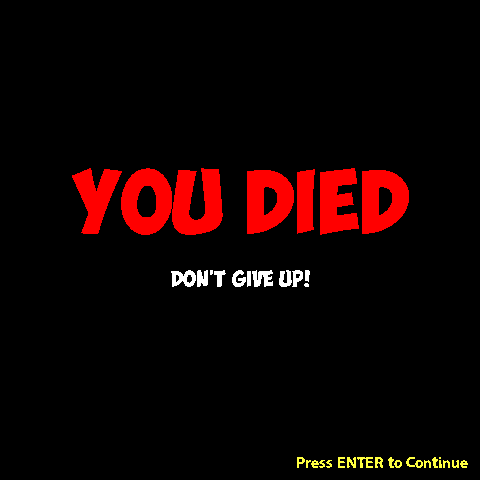
<style>
.page{position:relative;width:480px;height:480px;background:#000000}
.page>*{position:absolute;margin:0}
.t1{font:64px "ObelixPro";color:#ff0000}
.t2{font:16px "ObelixPro";color:#ffffff}
.t3{font:16px "LooseySans";color:#ffff40}
</style>
<div class="page">
<p class="t1" style="left:72px;top:168px;width:337px;height:67px">You Died</p>
<p class="t2" style="left:171px;top:270px;width:139px;height:17px">Don't Give up!</p>
<p class="t3" style="left:297px;top:457px;width:171px;height:11px">Press ENTER to Continue</p>
</div>
